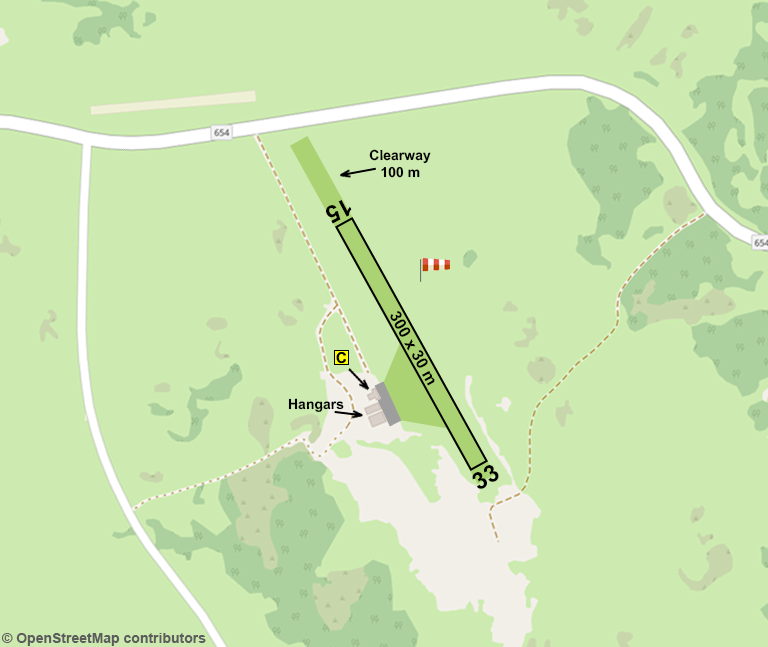
<style>
.page{position:relative;width:768px;height:647px;background:#cdebb0}
.page>*{position:absolute;margin:0}
.t1{font:14px "Arial-BoldMT";color:#000000}
.t2{font:24px "Arial-BoldMT";color:#000000}
.t3{font:16px "Arial-BoldMT";color:#000000}
.t4{font:14px "Arial-BoldMT";color:#5c5c5c}
</style>
<div class="page">
<p class="t1" style="left:369px;top:149px;width:62px;height:29px;text-align:center">Clearway<br>100 m</p>
<p class="t2" style="left:326px;top:200px;width:26px;height:24px;rotate:152deg">15</p>
<p class="t3" style="left:390px;top:311px;width:45px;height:75px;rotate:61deg">300 x 30 m</p>
<p class="t1" style="left:288px;top:398px;width:56px;height:14px;rotate:-1deg">Hangars</p>
<p class="t2" style="left:472px;top:465px;width:27px;height:24px;rotate:-30deg">33</p>
<p class="t4" style="left:1px;top:633px;width:205px;height:13px">© OpenStreetMap contributors</p>
</div>
